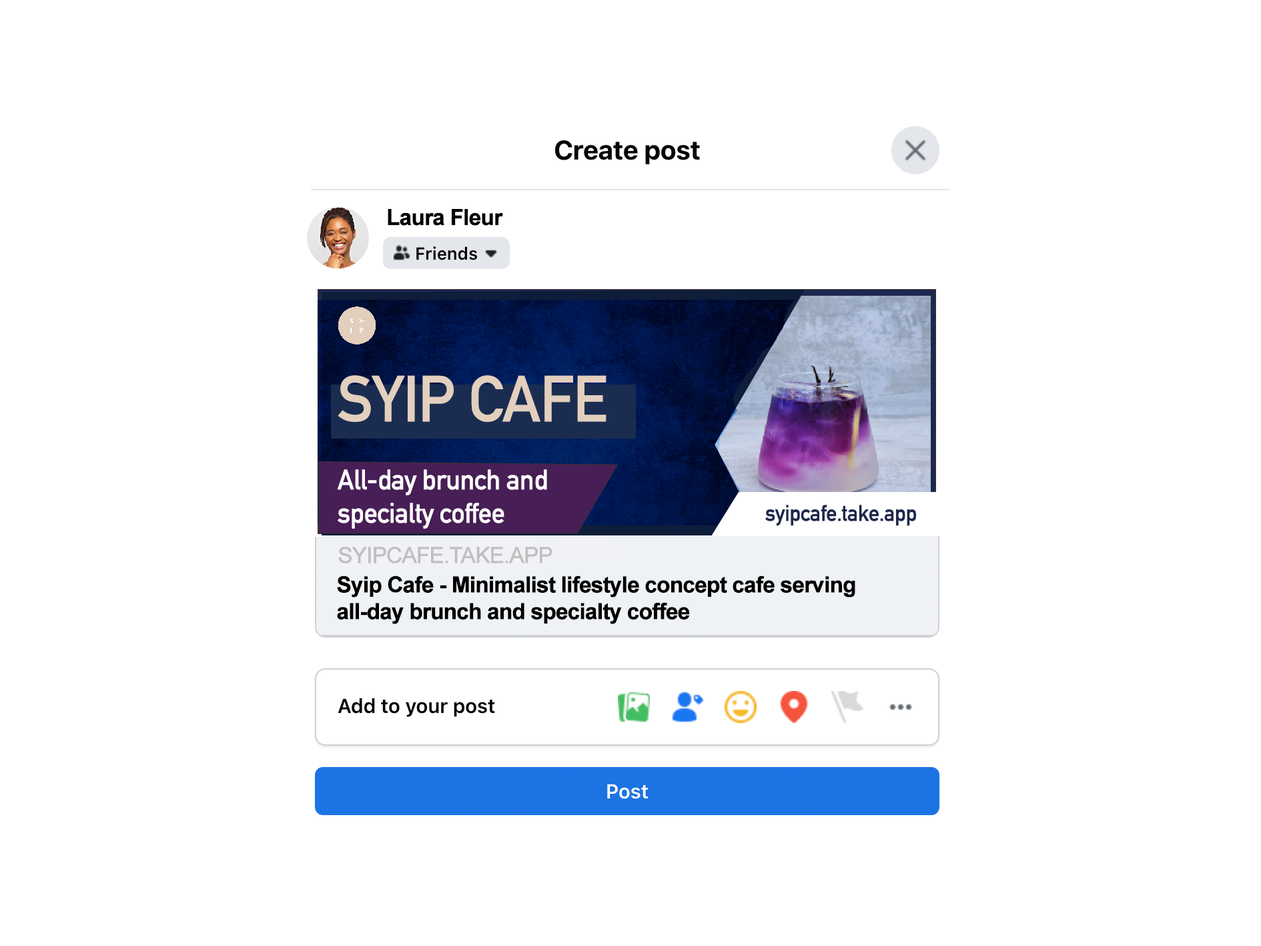
<style>
.page{position:relative;width:1261px;height:946px;background:#ffffff}
.page>*{position:absolute;margin:0}
.t1{font:64px "DINAlternate-Bold";letter-spacing:-0.05em;color:#e2cfbd;font-weight:bold}
.t2{font:27.8px "DINAlternate-Bold";letter-spacing:-0.05em;color:#ffffff;font-weight:bold}
.t3{font:22.2px "DINAlternate-Bold";letter-spacing:-0.05em;color:#1d284e;font-weight:bold}
.t4{font:22.2px "ArialMT";letter-spacing:-0.05em;color:#bfbfbf;font-weight:bold}
.t5{font:22.2px "Arial-BoldMT";letter-spacing:-0.05em;color:#000000;font-weight:bold}
</style>
<div class="page">
<p class="t1" style="left:338px;top:375px;width:269px;height:47px">SYIP CAFE</p>
<p class="t2" style="left:337px;top:469px;width:210px;height:59px">All-day brunch and<br>specialty coffee</p>
<p class="t3" style="left:765px;top:504px;width:151px;height:22px">syipcafe.take.app</p>
<p class="t4" style="left:338px;top:546px;width:214px;height:17px">SYIPCAFE.TAKE.APP</p>
<p class="t5" style="left:337px;top:575px;width:518px;height:49px">Syip Cafe - Minimalist lifestyle concept cafe serving<br>all-day brunch and specialty coffee</p>
</div>
